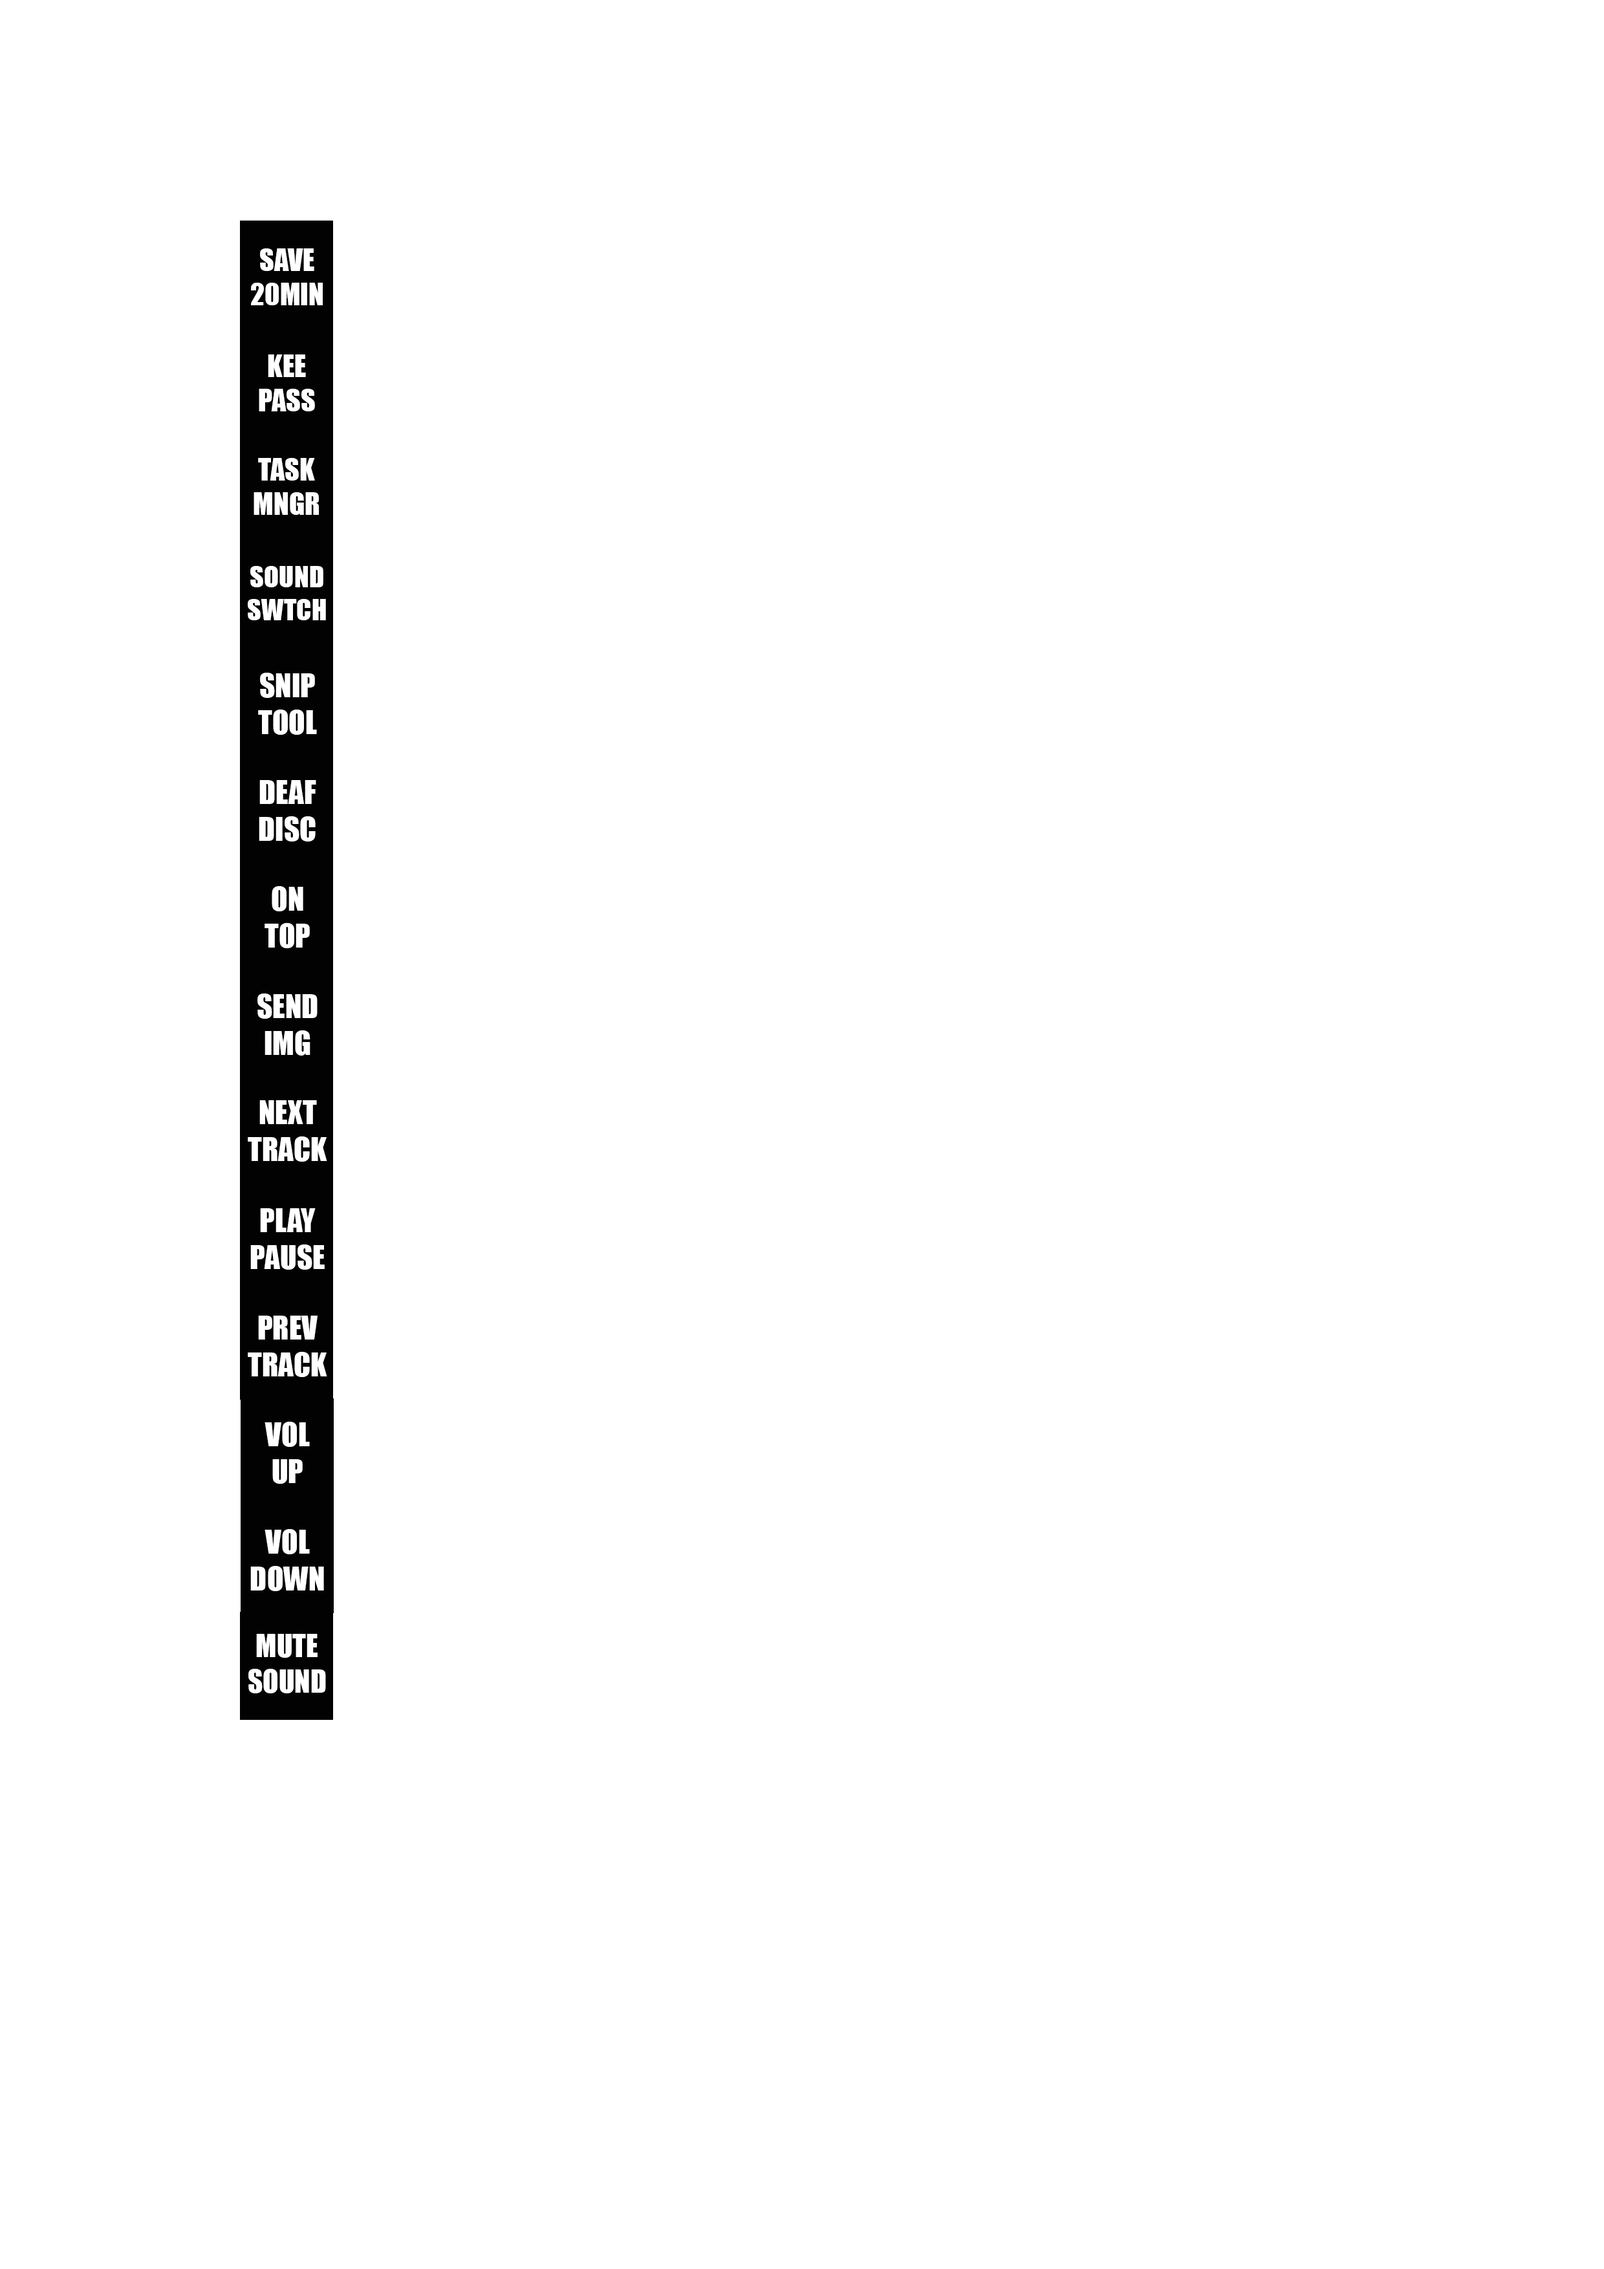
<style>
.page{position:relative;width:1604px;height:2269px;background:#ffffff}
.page>*{position:absolute;margin:0}
.t1{font:6.8px "Impact";color:#ffffff}
.t2{font:6.6px "Impact";color:#ffffff}
.t3{font:7.3px "Impact";color:#ffffff}
.t4{font:7px "Impact";color:#ffffff}
</style>
<div class="page">
<p class="t1" style="left:251px;top:248px;width:72px;height:57px;text-align:center">SAVE<br>20MIN</p>
<p class="t1" style="left:259px;top:354px;width:56px;height:57px;text-align:center">KEE<br>PASS</p>
<p class="t1" style="left:253px;top:458px;width:66px;height:57px;text-align:center">TASK<br>MNGR</p>
<p class="t2" style="left:248px;top:566px;width:78px;height:54px;text-align:center">SOUND<br>SWTCH</p>
<p class="t3" style="left:258px;top:673px;width:59px;height:62px;text-align:center">SNIP<br>TOOL</p>
<p class="t3" style="left:259px;top:780px;width:57px;height:61px;text-align:center">DEAF<br>DISC</p>
<p class="t3" style="left:264px;top:886px;width:46px;height:62px;text-align:center">ON<br>TOP</p>
<p class="t3" style="left:257px;top:993px;width:61px;height:62px;text-align:center">SEND<br>IMG</p>
<p class="t3" style="left:248px;top:1100px;width:79px;height:61px;text-align:center">NEXT<br>TRACK</p>
<p class="t3" style="left:250px;top:1208px;width:75px;height:61px;text-align:center">PLAY<br>PAUSE</p>
<p class="t3" style="left:248px;top:1315px;width:79px;height:62px;text-align:center">PREV<br>TRACK</p>
<p class="t3" style="left:264px;top:1421px;width:46px;height:62px;text-align:center">VOL<br>UP</p>
<p class="t3" style="left:250px;top:1529px;width:74px;height:62px;text-align:center">VOL<br>DOWN</p>
<p class="t4" style="left:248px;top:1633px;width:78px;height:60px;text-align:center">MUTE<br>SOUND</p>
</div>
